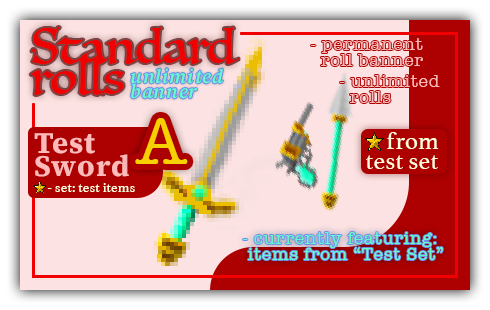
<style>
.page{position:relative;width:490px;height:310px;background:#fce2e2}
.page>*{position:absolute;margin:0}
.t1{font:46.7px/31.1px "Luminari-Regular";color:#f00000}
.t2{font:19.6px/15px "SourceSerif4Italic-SmTextSemiboldItalic";letter-spacing:0.04em;color:#66f9ca}
.t3{font:17.9px/16px "AmericanTypewriter";letter-spacing:0.04em;color:#ffbaba}
.t4{font:68px "AmericanTypewriter";letter-spacing:-0.08em;color:#f6d000}
.t5{font:29.9px/22.8px "SourceSerif4Roman-SmTextBold";letter-spacing:0.04em;color:#ffbaba}
.t6{font:29.9px/22.8px "SourceSerif4Roman-SmTextBold";letter-spacing:0.02em;color:#ffbaba}
.t7{font:25.2px/19.2px "Athelas-Regular";color:#ffffdf}
.t8{font:14.2px "Athelas-Regular";color:#ffffdf}
.t9{font:17.9px/16px "AmericanTypewriter";letter-spacing:0.04em;color:#66f9ca}
</style>
<div class="page">
<p class="t1" style="left:30px;top:27px;width:209px;height:68px">Standard<br>rolls</p>
<p class="t2" style="left:131px;top:68px;width:93px;height:31px">unlimited<br>banner</p>
<p class="t3" style="left:340px;top:75px;width:100px;height:28px">- unlimited<br>  rolls</p>
<p class="t4" style="left:135px;top:118px;width:53px;height:46px">A</p>
<p class="t5" style="left:34px;top:133px;width:95px;height:44px"><span class="t6">Test<br></span>Sword</p>
<p class="t7" style="left:366px;top:132px;width:73px;height:37px">from<br>test set</p>
<p class="t8" style="left:47px;top:183px;width:88px;height:9px">- set: test items</p>
<p class="t9" style="left:243px;top:232px;width:200px;height:28px">- currently featuring:<br> items from “Test Set”</p>
</div>
